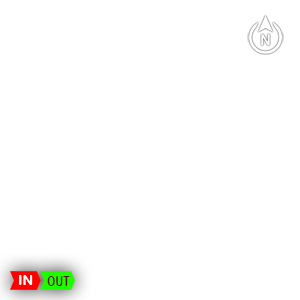
<style>
.page{position:relative;width:300px;height:300px;background:#ffffff}
.page>*{position:absolute;margin:0}
.t1{font:14.2px "ArialRoundedMTBold";color:#ffffff}
.t2{font:14.2px "ArialRoundedMTBold";color:#4b1b1b;scale:0.72 1}
</style>
<div class="page">
<p class="t1" style="left:19px;top:275px;width:14px;height:10px">IN</p>
<p class="t2" style="left:47px;top:276px;width:23px;height:10px">OUT</p>
</div>
